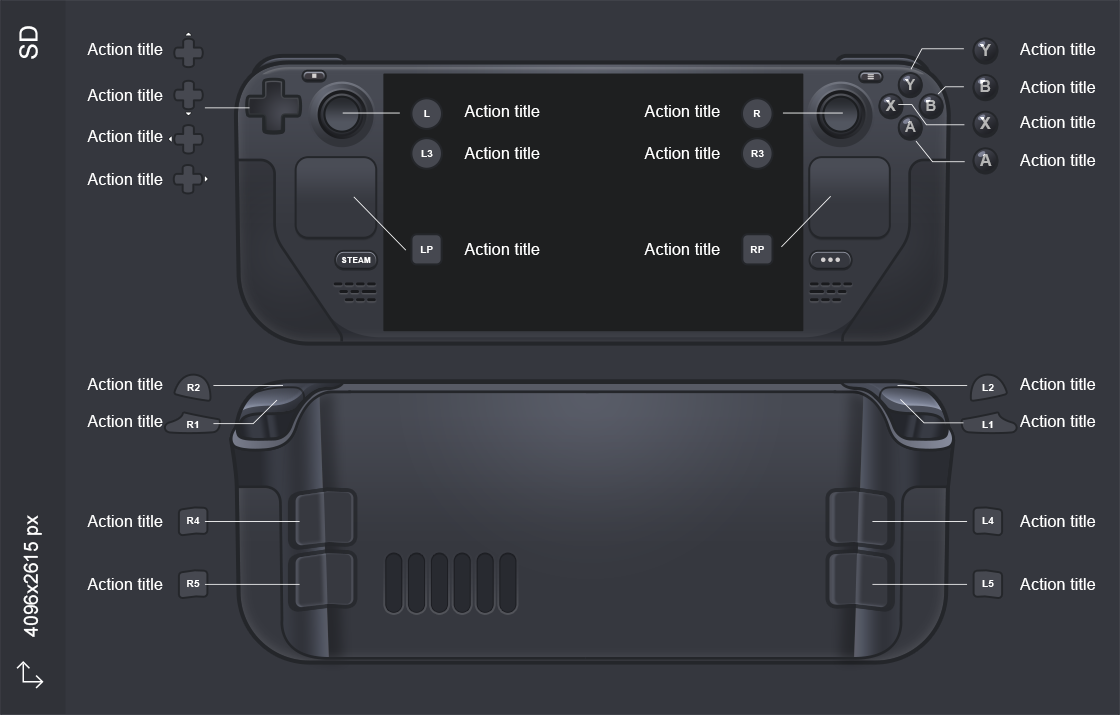
<style>
.page{position:relative;width:1120px;height:715px;background:#35373e}
.page>*{position:absolute;margin:0}
.t1{font:25px "ArialMT";color:#ffffff}
.t2{font:16.4px "ArialMT";color:#ffffff}
.t3{font:16px "Arial-BoldMT";color:#b6b6b6}
.t4{font:15.3px "Arial-BoldMT";color:#b6b6b6}
.t5{font:10.5px "Arial-BoldMT";color:#ffffff}
.t6{font:7.5px "Arial-BoldMT";letter-spacing:0.08em;color:#ffffff}
.t7{font:10.4px "Arial-BoldMT";color:#ffffff}
.t8{font:19.6px "ArialMT";color:#ffffff}
</style>
<div class="page">
<p class="t1" style="left:19px;top:26px;width:19px;height:33px;rotate:-90deg">SD</p>
<p class="t2" style="left:87px;top:43px;width:76px;height:12px">Action title</p>
<p class="t3" style="left:980px;top:44px;width:11px;height:12px">Y</p>
<p class="t2" style="left:1020px;top:43px;width:76px;height:12px">Action title</p>
<p class="t2" style="left:87px;top:89px;width:76px;height:12px">Action title</p>
<p class="t4" style="left:905px;top:79px;width:10px;height:11px">Y</p>
<p class="t3" style="left:980px;top:80px;width:11px;height:12px">B</p>
<p class="t2" style="left:1020px;top:81px;width:76px;height:12px">Action title</p>
<p class="t4" style="left:885px;top:100px;width:11px;height:11px">X</p>
<p class="t4" style="left:926px;top:100px;width:10px;height:11px">B</p>
<p class="t5" style="left:424px;top:110px;width:6px;height:7px">L</p>
<p class="t2" style="left:464px;top:105px;width:76px;height:12px">Action title</p>
<p class="t2" style="left:644px;top:105px;width:76px;height:12px">Action title</p>
<p class="t5" style="left:753px;top:110px;width:8px;height:7px">R</p>
<p class="t4" style="left:905px;top:121px;width:11px;height:11px">A</p>
<p class="t3" style="left:980px;top:117px;width:11px;height:12px">X</p>
<p class="t2" style="left:1020px;top:116px;width:76px;height:12px">Action title</p>
<p class="t2" style="left:87px;top:130px;width:76px;height:12px">Action title</p>
<p class="t5" style="left:421px;top:150px;width:12px;height:7px">L3</p>
<p class="t2" style="left:464px;top:147px;width:76px;height:12px">Action title</p>
<p class="t2" style="left:644px;top:147px;width:76px;height:12px">Action title</p>
<p class="t5" style="left:751px;top:150px;width:13px;height:7px">R3</p>
<p class="t3" style="left:980px;top:154px;width:12px;height:12px">A</p>
<p class="t2" style="left:1020px;top:154px;width:76px;height:12px">Action title</p>
<p class="t2" style="left:87px;top:173px;width:76px;height:12px">Action title</p>
<p class="t5" style="left:420px;top:246px;width:13px;height:7px">LP</p>
<p class="t2" style="left:464px;top:243px;width:76px;height:12px">Action title</p>
<p class="t2" style="left:644px;top:243px;width:76px;height:12px">Action title</p>
<p class="t5" style="left:750px;top:246px;width:14px;height:7px">RP</p>
<p class="t6" style="left:341px;top:257px;width:30px;height:6px">STEAM</p>
<p class="t2" style="left:87px;top:378px;width:76px;height:12px">Action title</p>
<p class="t7" style="left:187px;top:384px;width:13px;height:7px">R2</p>
<p class="t7" style="left:982px;top:384px;width:12px;height:7px">L2</p>
<p class="t2" style="left:1020px;top:378px;width:76px;height:12px">Action title</p>
<p class="t2" style="left:87px;top:415px;width:76px;height:12px">Action title</p>
<p class="t7" style="left:187px;top:421px;width:12px;height:7px">R1</p>
<p class="t7" style="left:982px;top:421px;width:11px;height:7px">L1</p>
<p class="t2" style="left:1020px;top:415px;width:76px;height:12px">Action title</p>
<p class="t8" style="left:23px;top:515px;width:19px;height:122px;rotate:-90deg">4096x2615 px</p>
<p class="t2" style="left:87px;top:515px;width:76px;height:12px">Action title</p>
<p class="t7" style="left:187px;top:517px;width:13px;height:7px">R4</p>
<p class="t7" style="left:982px;top:517px;width:12px;height:7px">L4</p>
<p class="t2" style="left:1020px;top:515px;width:76px;height:12px">Action title</p>
<p class="t2" style="left:87px;top:578px;width:76px;height:12px">Action title</p>
<p class="t7" style="left:187px;top:580px;width:13px;height:7px">R5</p>
<p class="t7" style="left:982px;top:580px;width:12px;height:7px">L5</p>
<p class="t2" style="left:1020px;top:578px;width:76px;height:12px">Action title</p>
</div>
